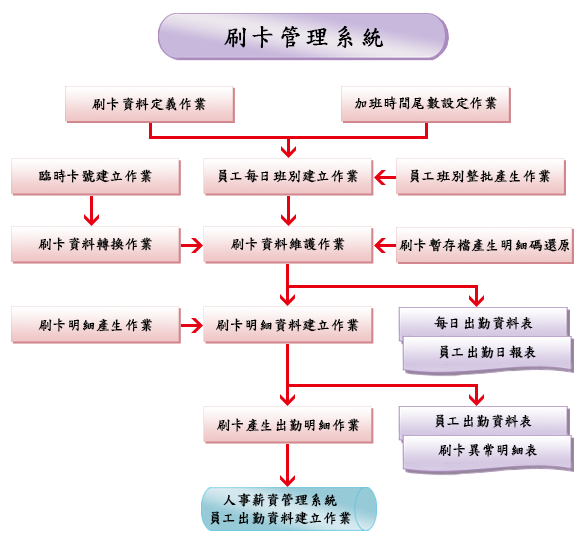
<style>
.page{position:relative;width:577px;height:545px;background:#ffffff}
.page>*{position:absolute;margin:0}
.t1{font:24px "DFKaiShu-SB-Estd-BF";letter-spacing:0.1em;color:#000000;font-weight:bold}
.t2{font:14px "DFKaiShu-SB-Estd-BF";color:#000000;font-weight:bold}
.t3{font:14px/18px "DFKaiShu-SB-Estd-BF";color:#000000;font-weight:bold}
</style>
<div class="page">
<p class="t1" style="left:224px;top:26px;width:160px;height:22px">刷卡管理系統</p>
<p class="t2" style="left:92px;top:97px;width:114px;height:14px">刷卡資料定義作業</p>
<p class="t2" style="left:354px;top:96px;width:143px;height:14px">加班時間尾數設定作業</p>
<p class="t2" style="left:39px;top:169px;width:113px;height:14px">臨時卡號建立作業</p>
<p class="t2" style="left:218px;top:169px;width:140px;height:14px">員工每日班別建立作業</p>
<p class="t2" style="left:410px;top:169px;width:141px;height:14px">員工班別整批產生作業</p>
<p class="t2" style="left:38px;top:237px;width:114px;height:14px">刷卡資料轉換作業</p>
<p class="t2" style="left:231px;top:237px;width:114px;height:14px">刷卡資料維護作業</p>
<p class="t2" style="left:399px;top:238px;width:170px;height:14px">刷卡暫存檔產生明細碼還原</p>
<p class="t2" style="left:38px;top:318px;width:115px;height:14px">刷卡明細產生作業</p>
<p class="t2" style="left:216px;top:318px;width:143px;height:14px">刷卡明細資料建立作業</p>
<p class="t2" style="left:434px;top:316px;width:99px;height:14px">每日出勤資料表</p>
<p class="t2" style="left:439px;top:345px;width:97px;height:14px">員工出勤日報表</p>
<p class="t2" style="left:435px;top:414px;width:97px;height:14px">員工出勤資料表</p>
<p class="t2" style="left:217px;top:418px;width:143px;height:14px">刷卡產生出勤明細作業</p>
<p class="t2" style="left:438px;top:443px;width:99px;height:14px">刷卡異常明細表</p>
<p class="t3" style="left:210px;top:493px;width:141px;height:32px;text-align:center">人事薪資管理系統<br>員工出勤資料建立作業</p>
</div>
